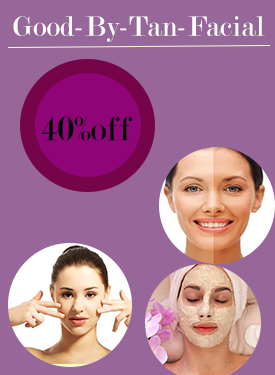
<style>
.page{position:relative;width:275px;height:375px;background:#97679a}
.page>*{position:absolute;margin:0}
.t1{font:30px "Modern-Regular";color:#ffffff}
.t2{font:36.2px "Modern-Regular";color:#020a08}
</style>
<div class="page">
<p class="t1" style="left:13px;top:16px;width:252px;height:26px">Good-By-Tan-Facial</p>
<p class="t2" style="left:41px;top:116px;width:92px;height:25px">40%off</p>
</div>
